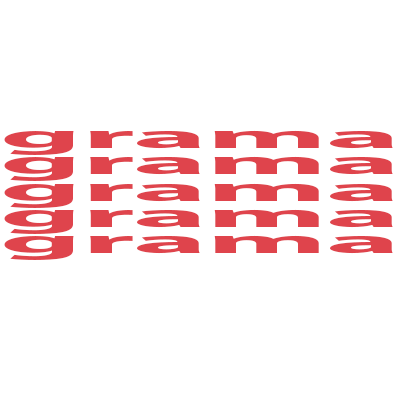
<style>
.page{position:relative;width:400px;height:400px;background:#ffffff}
.page>*{position:absolute;margin:0}
.t1{font:34px "MyriadPro-Bold";color:#df444c;scale:4.09 1}
</style>
<div class="page">
<p class="t1" style="left:4px;top:130px;width:389px;height:25px">grama</p>
<p class="t1" style="left:4px;top:156px;width:389px;height:25px">grama</p>
<p class="t1" style="left:4px;top:183px;width:389px;height:25px">grama</p>
<p class="t1" style="left:4px;top:209px;width:389px;height:25px">grama</p>
<p class="t1" style="left:4px;top:235px;width:389px;height:25px">grama</p>
</div>
